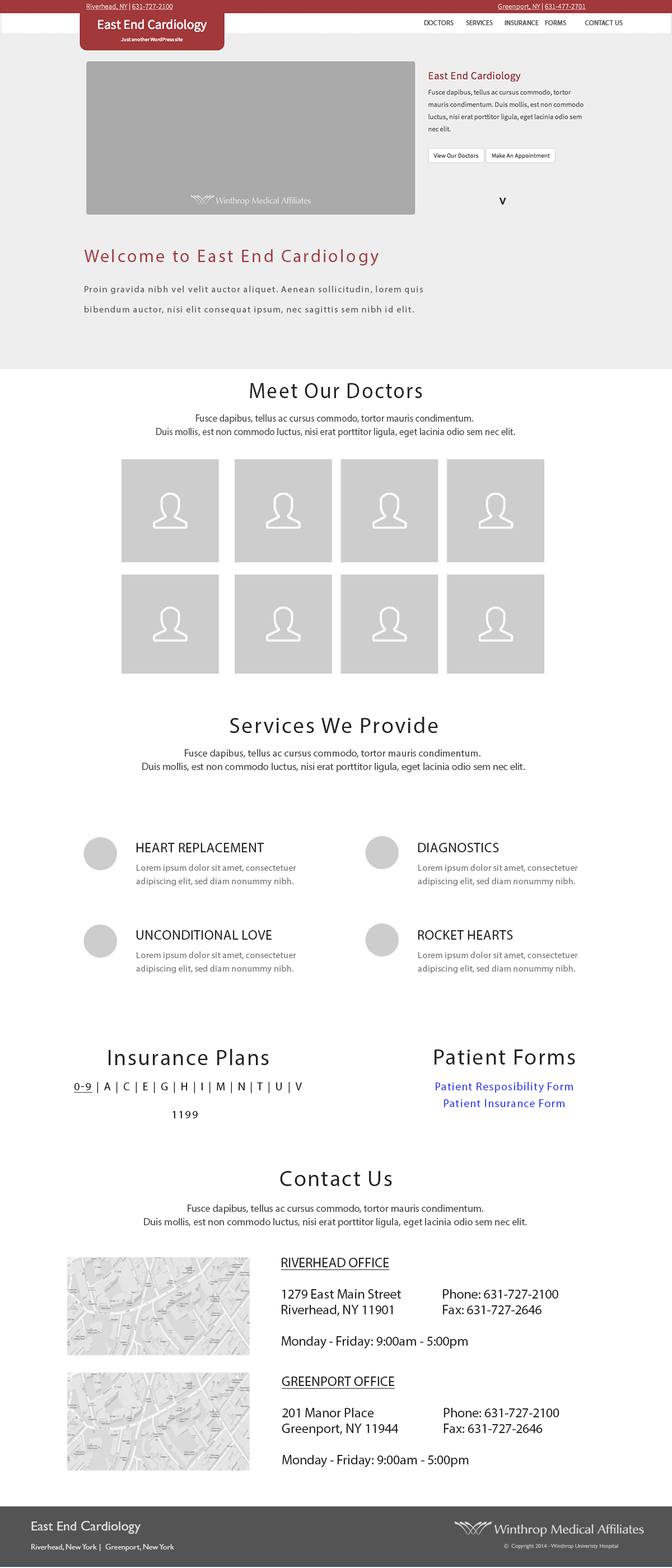
<style>
.page{position:relative;width:672px;height:1568px;background:#ffffff}
.page>*{position:absolute;margin:0}
.t1{font:6.7px "MyriadPro-Regular";color:#575757;text-transform:uppercase;font-weight:bold}
.t2{font:6.7px "MyriadPro-Regular";color:#222222;font-weight:bold}
.t3{font:9px/20.2px "MyriadPro-Regular";letter-spacing:0.1em;color:#575757}
.t4{font:17.9px/10.1px "MyriadPro-Regular";letter-spacing:0.1em;color:#a2383a}
.t5{font:22.4px "MyriadPro-Regular";letter-spacing:0.06em;color:#222222;scale:0.94 1}
.t6{font:10.1px/13.4px "MyriadPro-Regular";color:#4b4b4b;scale:0.94 1}
.t7{font:22.4px "MyriadPro-Regular";letter-spacing:0.06em;color:#222222}
.t8{font:10.1px/13.4px "MyriadPro-Regular";color:#4b4b4b}
.t9{font:13.4px "MyriadPro-Regular";letter-spacing:0.02em;color:#222222;text-transform:uppercase}
.t10{font:9px/13.4px "MyriadPro-Regular";letter-spacing:0.02em;color:#777777}
.t11{font:11.2px "MyriadPro-Regular";letter-spacing:0.12em;color:#000000;text-transform:uppercase}
.t12{font:11.2px "MyriadPro-Regular";letter-spacing:0.12em;color:#000000;text-transform:uppercase;text-decoration:underline}
.t13{font:11.2px/16.7px "MyriadPro-Regular";letter-spacing:0.06em;color:#2532e9}
.t14{font:13.4px/15.7px "MyriadPro-Regular";color:#222222}
.t15{font:13.4px/15.7px "MyriadPro-Regular";color:#222222;text-transform:uppercase;text-decoration:underline}
.t16{font:7.8px "GillSans";color:#e4e4e4}
.t17{font:13.4px "GillSans";color:#e4e4e4}
.t18{font:5.6px "GillSans";color:#bebebe}
</style>
<div class="page">
<p class="t1" style="left:424px;top:20px;width:199px;height:6px">doctors  services  insurance  forms  contact us</p>
<p class="t2" style="left:499px;top:198px;width:7px;height:7px">v</p>
<p class="t3" style="left:84px;top:249px;width:339px;height:65px"><span class="t4">Welcome to East End Cardiology<br><br></span>Proin gravida nibh vel velit auctor aliquet. Aenean sollicitudin, lorem quis bibendum auctor, nisi elit consequat ipsum, nec sagittis sem nibh id elit.</p>
<p class="t5" style="left:250px;top:383px;width:172px;height:15px">Meet Our Doctors</p>
<p class="t6" style="left:156px;top:414px;width:359px;height:23px;text-align:center">Fusce dapibus, tellus ac cursus commodo, tortor mauris condimentum. <br>Duis mollis, est non commodo luctus, nisi erat porttitor ligula, eget lacinia odio sem nec elit.</p>
<p class="t7" style="left:230px;top:717px;width:208px;height:16px">Services We Provide</p>
<p class="t8" style="left:142px;top:749px;width:383px;height:23px;text-align:center">Fusce dapibus, tellus ac cursus commodo, tortor mauris condimentum. <br>Duis mollis, est non commodo luctus, nisi erat porttitor ligula, eget lacinia odio sem nec elit.</p>
<p class="t9" style="left:136px;top:843px;width:128px;height:9px">Heart Replacement</p>
<p class="t9" style="left:418px;top:843px;width:81px;height:9px">Diagnostics</p>
<p class="t10" style="left:136px;top:864px;width:160px;height:22px">Lorem ipsum dolor sit amet, consectetuer <br>adipiscing elit, sed diam nonummy nibh.</p>
<p class="t10" style="left:418px;top:864px;width:160px;height:22px">Lorem ipsum dolor sit amet, consectetuer <br>adipiscing elit, sed diam nonummy nibh.</p>
<p class="t9" style="left:136px;top:930px;width:136px;height:10px">Unconditional Love</p>
<p class="t9" style="left:418px;top:930px;width:95px;height:10px">ROCKET Hearts</p>
<p class="t10" style="left:136px;top:951px;width:160px;height:23px">Lorem ipsum dolor sit amet, consectetuer <br>adipiscing elit, sed diam nonummy nibh.</p>
<p class="t10" style="left:418px;top:951px;width:160px;height:23px">Lorem ipsum dolor sit amet, consectetuer <br>adipiscing elit, sed diam nonummy nibh.</p>
<p class="t7" style="left:109px;top:1049px;width:160px;height:16px">Insurance Plans</p>
<p class="t7" style="left:435px;top:1049px;width:140px;height:16px">Patient Forms</p>
<p class="t11" style="left:74px;top:1082px;width:228px;height:11px"><span class="t12">0-9</span> | a | c | e | g | h | i | m | n | t | u | v</p>
<p class="t13" style="left:436px;top:1082px;width:137px;height:25px;text-align:center">Patient Resposibility Form<br>Patient Insurance Form</p>
<p class="t11" style="left:172px;top:1111px;width:26px;height:7px">1199</p>
<p class="t7" style="left:280px;top:1171px;width:112px;height:15px">Contact Us</p>
<p class="t8" style="left:144px;top:1205px;width:383px;height:23px;text-align:center">Fusce dapibus, tellus ac cursus commodo, tortor mauris condimentum. <br>Duis mollis, est non commodo luctus, nisi erat porttitor ligula, eget lacinia odio sem nec elit.</p>
<p class="t14" style="left:281px;top:1258px;width:277px;height:90px"><span class="t15">Riverhead office<br><br></span>1279 East Main Street   Phone: 631-727-2100<br>Riverhead, NY 11901   Fax: 631-727-2646<br><br>Monday - Friday: 9:00am - 5:00pm</p>
<p class="t14" style="left:282px;top:1376px;width:277px;height:91px"><span class="t15">Greenport office<br><br></span>201 Manor Place    Phone: 631-727-2100<br>Greenport, NY 11944   Fax: 631-727-2646<br><br>Monday - Friday: 9:00am - 5:00pm</p>
<p class="t16" style="left:31px;top:1521px;width:143px;height:30px"><span class="t17">East End Cardiology<br></span><br>Riverhead, New York |  Greenport, New York</p>
<p class="t18" style="left:504px;top:1543px;width:114px;height:6px">©  Copyright 2014 - Winthrop Univeristy Hospital</p>
</div>
